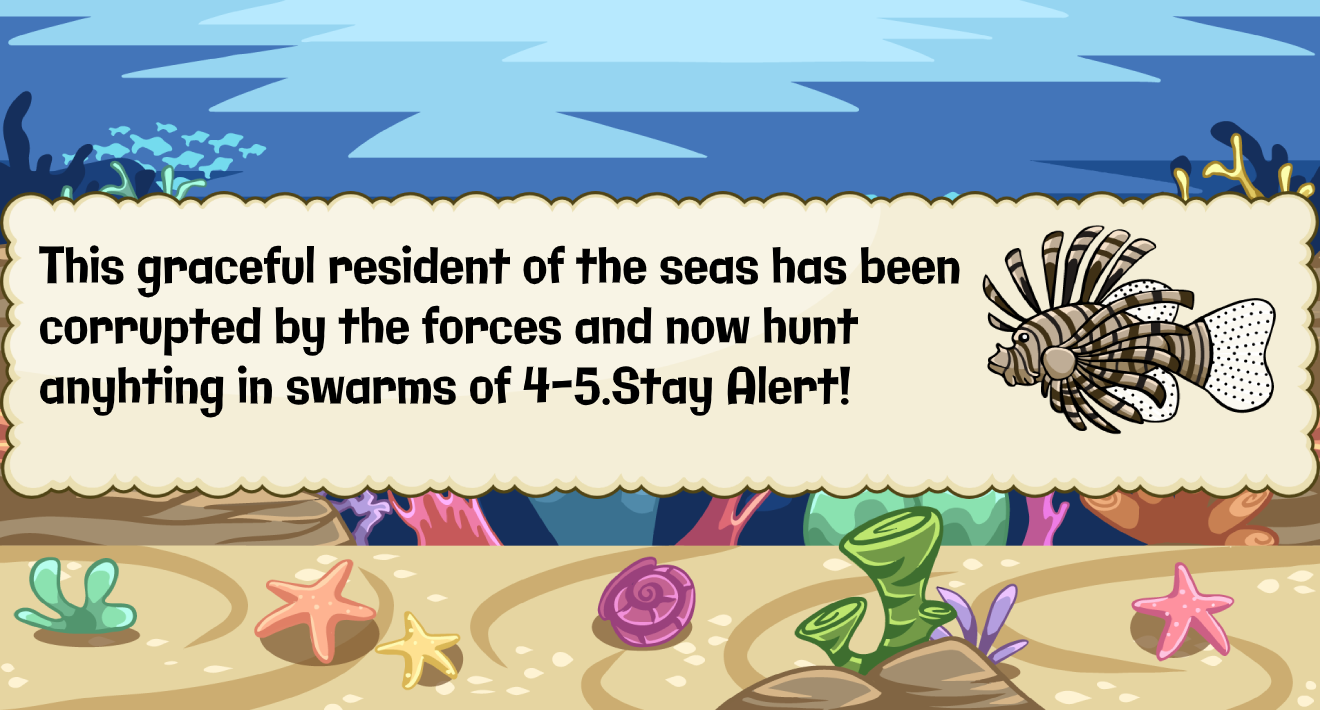
<style>
.page{position:relative;width:1320px;height:710px}
.page>*{position:absolute;margin:0}
.t1{font:50.1px "Galindo-Regular";color:#000000;scale:0.82 1}
</style>
<div class="page">
<p class="t1" style="left:39px;top:245px;width:921px;height:173px">This graceful resident of the seas has been<br>corrupted by the forces and now hunt <br>anyhting in swarms of 4-5.Stay Alert!</p>
</div>
